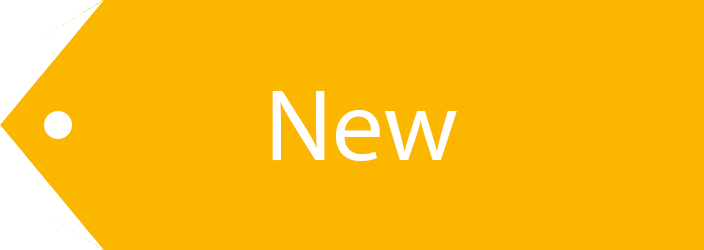
<style>
.page{position:relative;width:704px;height:250px;background:#fbb700}
.page>*{position:absolute;margin:0}
.t1{font:102px "MyriadPro-Regular";color:#ffffff}
</style>
<div class="page">
<p class="t1" style="left:272px;top:90px;width:185px;height:71px">New</p>
</div>
